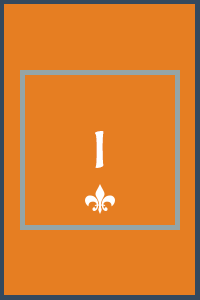
<style>
.page{position:relative;width:200px;height:300px;background:#e67e22}
.page>*{position:absolute;margin:0}
.t1{font:50.4px "Aladin-Regular";color:#ffffff}
</style>
<div class="page">
<p class="t1" style="left:95px;top:131px;width:9px;height:37px">I</p>
</div>
